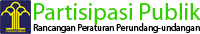
<style>
.page{position:relative;width:200px;height:34px;background:#ffffff}
.page>*{position:absolute;margin:0}
.t1{font:24px "MyriadPro-Regular";color:#33cc00}
.t2{font:10px "MyriadPro-Regular";color:#000000;scale:0.91 1}
</style>
<div class="page">
<p class="t1" style="left:34px;top:3px;width:167px;height:22px">Partisipasi Publik</p>
<p class="t2" style="left:33px;top:23px;width:167px;height:10px">Rancangan Peraturan Perundang-undangan</p>
</div>
